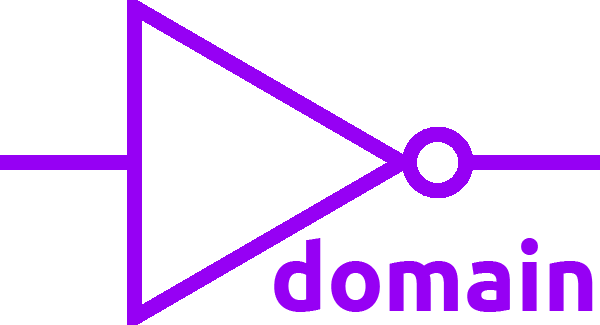
<style>
.page{position:relative;width:600px;height:325px;background:#ffffff}
.page>*{position:absolute;margin:0}
.t1{font:93.6px "Ubuntu-Bold";color:#9600f4}
</style>
<div class="page">
<p class="t1" style="left:274px;top:238px;width:319px;height:74px">domain</p>
</div>
